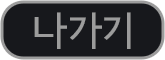
<style>
.page{position:relative;width:165px;height:60px;background:#17181c}
.page>*{position:absolute;margin:0}
.t1{font:40px "SeoulNamsanB";letter-spacing:-0.02em;color:#9c9c9c}
</style>
<div class="page">
<p class="t1" style="left:34px;top:12px;width:97px;height:37px">나가기</p>
</div>
